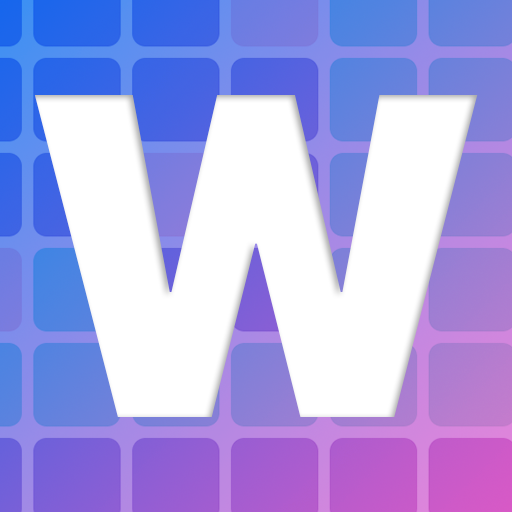
<style>
.page{position:relative;width:512px;height:512px;background:#ffffff}
.page>*{position:absolute;margin:0}
.t1{font:457px "SFPro-Black";color:#ffffff}
</style>
<div class="page">
<p class="t1" style="left:34px;top:95px;width:444px;height:322px">W</p>
</div>
